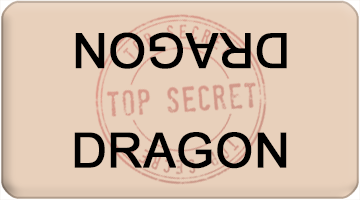
<style>
.page{position:relative;width:360px;height:200px;background:#e8d0bb}
.page>*{position:absolute;margin:0}
.t1{font:48px "ArialMT";color:#000000;font-weight:bold}
</style>
<div class="page">
<p class="t1" style="left:75px;top:32px;width:212px;height:37px;rotate:180deg">DRAGON</p>
<p class="t1" style="left:74px;top:132px;width:213px;height:37px">DRAGON</p>
</div>
